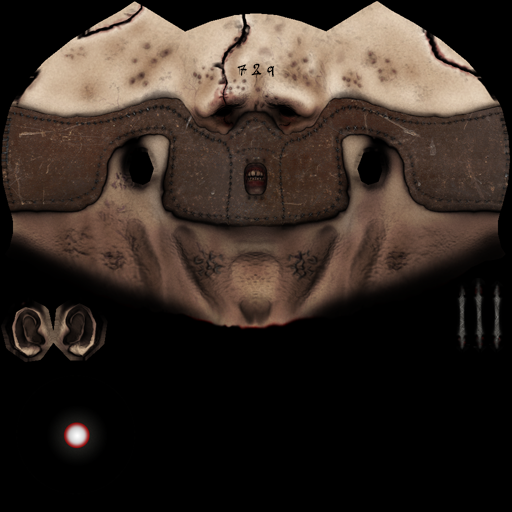
<style>
.page{position:relative;width:512px;height:512px;background:#000000}
.page>*{position:absolute;margin:0}
.t1{font:18px "adrippingmarker";color:#000000}
</style>
<div class="page">
<p class="t1" style="left:237px;top:63px;width:38px;height:15px">7  2  9</p>
</div>
